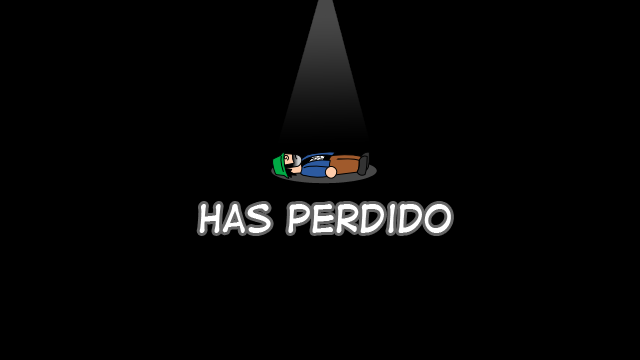
<style>
.page{position:relative;width:640px;height:360px;background:#000000}
.page>*{position:absolute;margin:0}
.t1{font:36px "DigitalStrip";color:#ffffff}
</style>
<div class="page">
<p class="t1" style="left:199px;top:204px;width:252px;height:29px">Has perdido</p>
</div>
